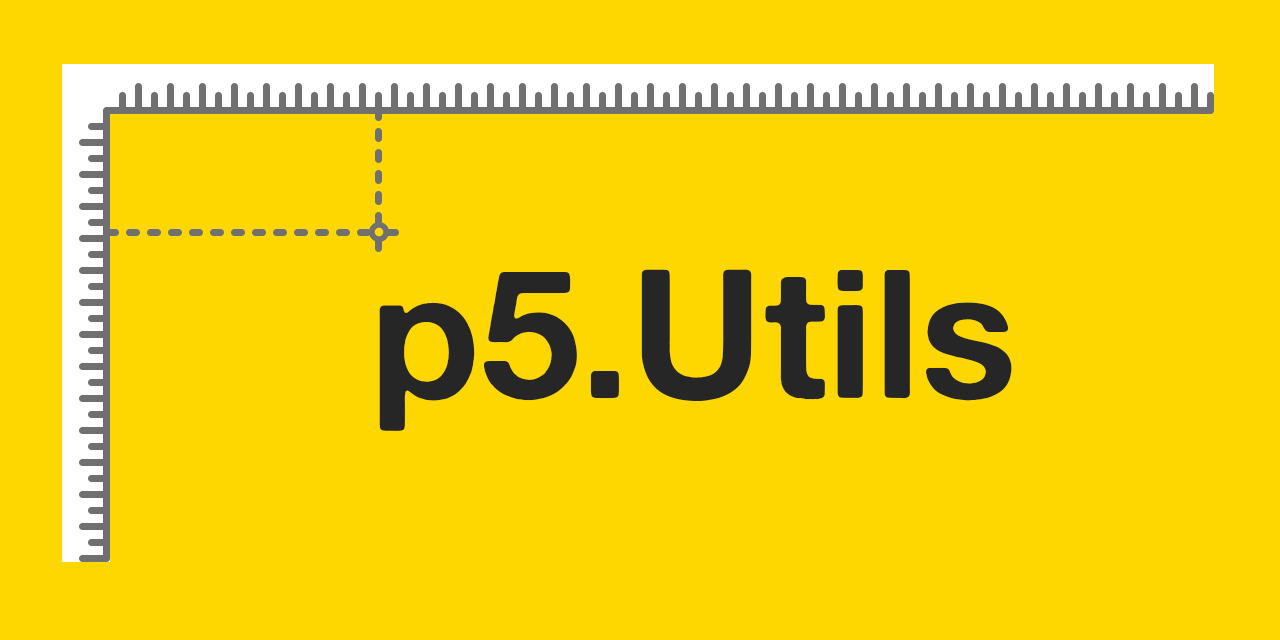
<style>
.page{position:relative;width:1280px;height:640px;background:#ffd700}
.page>*{position:absolute;margin:0}
.t1{font:180.2px "AlteHaasGrotesk_Bold";color:#262626}
</style>
<div class="page">
<p class="t1" style="left:379px;top:269px;width:633px;height:162px">p5.Utils</p>
</div>
